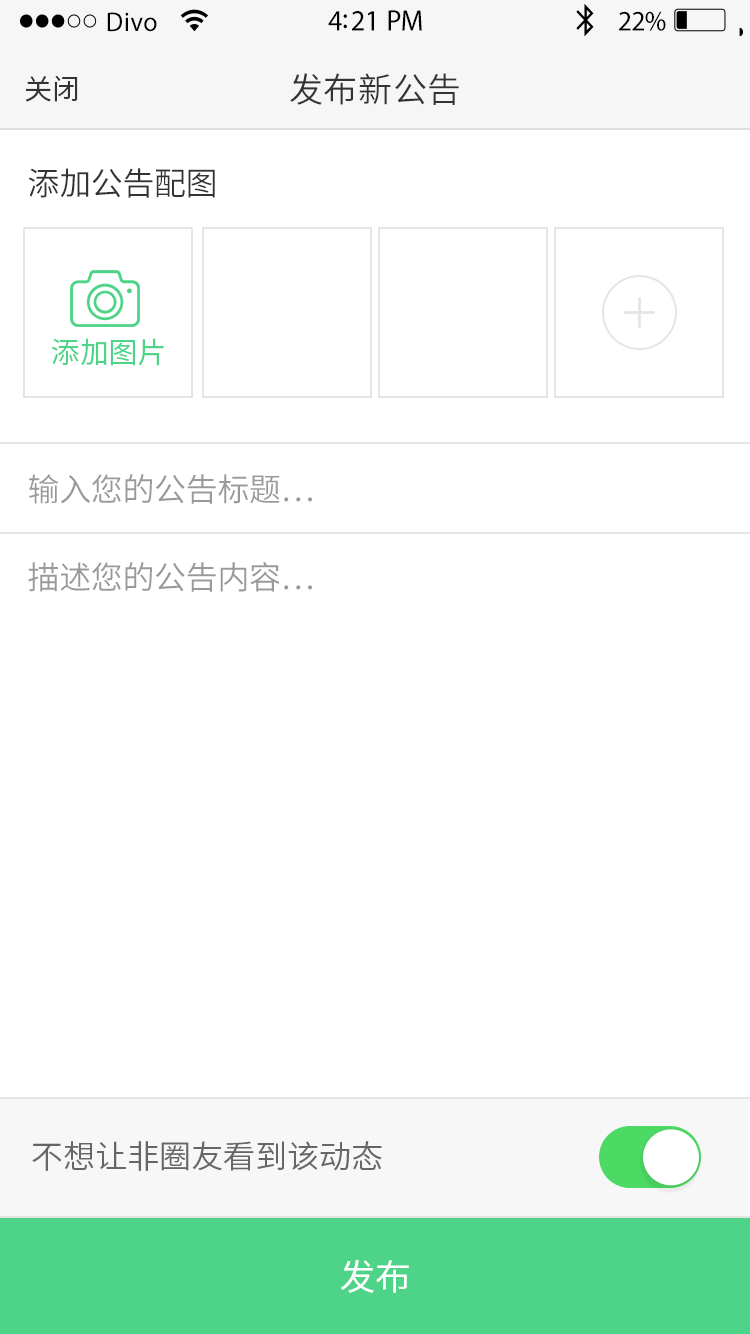
<style>
.page{position:relative;width:750px;height:1334px;background:#ffffff}
.page>*{position:absolute;margin:0}
.t1{font:27.3px "MyriadPro-Regular";letter-spacing:0.02em;color:#000000;scale:0.96 1}
.t2{font:29.6px "MyriadPro-Regular";letter-spacing:-0.02em;color:#000000;scale:0.96 1}
.t3{font:28.4px "MyriadPro-Regular";letter-spacing:-0.02em;color:#000000;scale:0.96 1}
.t4{font:28px "SourceHanSansCN-Normal";color:#333333}
.t5{font:34px "SourceHanSansCN-Normal";letter-spacing:0.02em;color:#333333}
.t6{font:32px "SourceHanSansCN-Normal";letter-spacing:-0.01em;color:#333333}
.t7{font:28.9px "SourceHanSansCN-Normal";color:#4dd489}
.t8{font:32px "SourceHanSansCN-Normal";letter-spacing:-0.01em;color:#999999}
.t9{font:32px "SourceHanSansCN-Normal";color:#666666}
.t10{font:36px "SourceHanSansCN-Regular";letter-spacing:-0.01em;color:#ffffff}
</style>
<div class="page">
<p class="t1" style="left:107px;top:12px;width:50px;height:20px">Divo</p>
<p class="t2" style="left:328px;top:10px;width:94px;height:21px">4:21 PM</p>
<p class="t3" style="left:619px;top:11px;width:47px;height:20px">22%</p>
<p class="t4" style="left:25px;top:75px;width:53px;height:27px">关闭</p>
<p class="t5" style="left:290px;top:73px;width:169px;height:32px">发布新公告</p>
<p class="t6" style="left:28px;top:168px;width:187px;height:30px">添加公告配图</p>
<p class="t7" style="left:52px;top:338px;width:112px;height:28px">添加图片</p>
<p class="t8" style="left:29px;top:474px;width:283px;height:30px">输入您的公告标题…</p>
<p class="t8" style="left:28px;top:562px;width:284px;height:30px">描述您的公告内容…</p>
<p class="t9" style="left:32px;top:1141px;width:350px;height:30px">不想让非圈友看到该动态</p>
<p class="t10" style="left:340px;top:1259px;width:69px;height:34px">发布</p>
</div>
